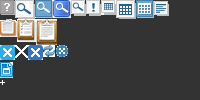
<style>
.page{position:relative;width:200px;height:100px;background:#333333}
.page>*{position:absolute;margin:0}
.t1{font:11px "Dotum";color:#ffffff}
</style>
<div class="page">
<p class="t1" style="left:0px;top:80px;width:5px;height:5px">+</p>
</div>
